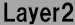
<style>
.page{position:relative;width:75px;height:25px;background:#a6a6a6}
.page>*{position:absolute;margin:0}
.t1{font:24px "HGPSoeiKakugothicUB";color:#000000}
</style>
<div class="page">
<p class="t1" style="left:4px;top:2px;width:70px;height:23px">Layer2</p>
</div>
